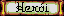
<style>
.page{position:relative;width:64px;height:16px;background:#000000}
.page>*{position:absolute;margin:0}
.t1{font:10px "PrimusScript";color:#000000}
</style>
<div class="page">
<p class="t1" style="left:16px;top:2px;width:33px;height:10px">Herói</p>
</div>
